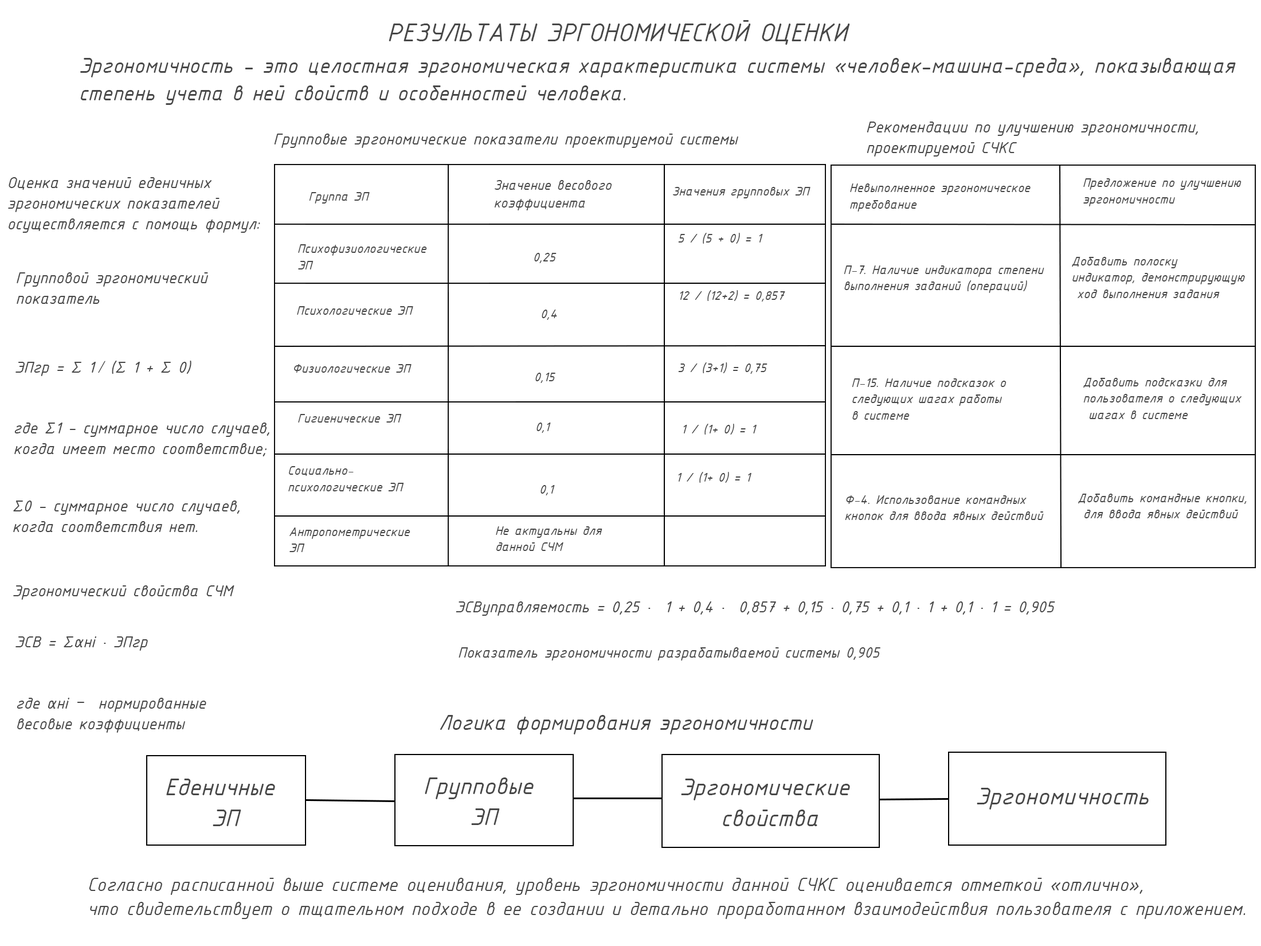
<style>
.page{position:relative;width:1261px;height:946px;background:#ffffff}
.page>*{position:absolute;margin:0}
.t1{font:27.5px "ISOCPEURItalic";color:#484848}
.t2{font:22.9px "ISOCPEURItalic";color:#484848}
.t3{font:17.2px "ISOCPEURItalic";color:#484848}
.t4{font:14.9px "ISOCPEURItalic";color:#484848}
.t5{font:13.8px "ISOCPEURItalic";color:#484848}
.t6{font:17.2px "MyriadPro-Regular";color:#484848}
.t7{font:16px "ISOCPEURItalic";color:#484848}
.t8{font:25.8px "ISOCPEURItalic";color:#484848}
.t9{font:20.1px "ISOCPEURItalic";color:#484848}
</style>
<div class="page">
<p class="t1" style="left:389px;top:20px;width:461px;height:25px">РЕЗУЛЬТАТЫ ЭРГОНОМИЧЕСКОЙ ОЦЕНКИ</p>
<p class="t2" style="left:80px;top:58px;width:1156px;height:47px">Эргономичность - это целостная эргономическая характеристика системы «человек-машина-среда», показывающая <br>степень учета в ней свойств и особенностей человека.</p>
<p class="t3" style="left:867px;top:122px;width:331px;height:34px">Рекомендации по улучшению эргономичности, <br>проектируемой СЧКС</p>
<p class="t3" style="left:274px;top:134px;width:464px;height:14px">Групповые эргономические показатели проектируемой системы</p>
<p class="t3" style="left:8px;top:177px;width:252px;height:56px">Оценка значений еденичных <br>эргономических показателей<br>осуществляется с помощь формул:</p>
<p class="t4" style="left:495px;top:180px;width:117px;height:30px">Значение весового <br>коэффициента</p>
<p class="t5" style="left:850px;top:183px;width:181px;height:28px">Невыполненное эргономическое <br>требование</p>
<p class="t5" style="left:1083px;top:178px;width:158px;height:28px">Предложение по улучшению <br>эргономичности</p>
<p class="t5" style="left:309px;top:192px;width:61px;height:11px">Группа ЭП</p>
<p class="t5" style="left:673px;top:187px;width:137px;height:11px">Значения групповых ЭП</p>
<p class="t5" style="left:678px;top:233px;width:85px;height:11px">5 / (5 + 0) = 1</p>
<p class="t5" style="left:298px;top:244px;width:129px;height:25px">Психофизиологические <br>ЭП</p>
<p class="t5" style="left:534px;top:253px;width:23px;height:10px">0,25</p>
<p class="t5" style="left:1072px;top:257px;width:173px;height:41px">Добавить полоску <br>индикатор, демонстрирующую<br> ход выполнения задания</p>
<p class="t5" style="left:844px;top:265px;width:200px;height:28px">П-7. Наличие индикатора степени <br>выполнения заданий (операций)</p>
<p class="t3" style="left:17px;top:272px;width:191px;height:32px">Групповой эргономический <br>показатель</p>
<p class="t5" style="left:680px;top:290px;width:105px;height:11px">12 / (12+2) = 0,857</p>
<p class="t5" style="left:297px;top:306px;width:116px;height:9px">Психологические ЭП</p>
<p class="t5" style="left:542px;top:309px;width:15px;height:11px">0,4</p>
<p class="t3" style="left:15px;top:361px;width:176px;height:15px">ЭПгр = ∑ 1 <span class="t6">∕</span> (∑ 1 + ∑ 0)</p>
<p class="t5" style="left:294px;top:364px;width:118px;height:9px">Физиологические ЭП</p>
<p class="t5" style="left:678px;top:362px;width:89px;height:12px">3 / (3+1) = 0,75</p>
<p class="t5" style="left:535px;top:372px;width:20px;height:11px">0,15</p>
<p class="t5" style="left:852px;top:378px;width:154px;height:42px">П-15. Наличие подсказок о <br>следующих шагах работы <br>в системе</p>
<p class="t5" style="left:1083px;top:378px;width:158px;height:41px">Добавить подсказки для <br>пользователя о следующих<br> шагах в системе</p>
<p class="t5" style="left:298px;top:414px;width:104px;height:8px">Гигиенические ЭП</p>
<p class="t3" style="left:14px;top:422px;width:255px;height:34px">где ∑1 − суммарное число случаев, <br>когда имеет место соответствие;</p>
<p class="t5" style="left:536px;top:422px;width:15px;height:11px">0,1</p>
<p class="t5" style="left:683px;top:424px;width:74px;height:10px">1 / (1+ 0) = 1</p>
<p class="t5" style="left:288px;top:466px;width:116px;height:25px">Социально-<br>психологические ЭП</p>
<p class="t5" style="left:678px;top:472px;width:73px;height:11px">1 / (1+ 0) = 1</p>
<p class="t5" style="left:540px;top:484px;width:15px;height:11px">0,1</p>
<p class="t5" style="left:845px;top:495px;width:199px;height:25px">Ф-4. Использование командных <br>кнопок для ввода явных действий</p>
<p class="t5" style="left:1078px;top:493px;width:169px;height:25px">Добавить командные кнопки,<br> для ввода явных действий</p>
<p class="t3" style="left:13px;top:500px;width:227px;height:32px">∑0 − суммарное число случаев, <br>когда соответствия нет.</p>
<p class="t5" style="left:289px;top:527px;width:121px;height:25px">Антропометрические <br>ЭП</p>
<p class="t5" style="left:496px;top:526px;width:106px;height:25px">Не актуальны для <br>данной СЧМ</p>
<p class="t3" style="left:13px;top:585px;width:221px;height:15px">Эргономический свойства СЧМ</p>
<p class="t3" style="left:456px;top:601px;width:599px;height:15px">ЭСВуправляемость = 0,25 ·  1 + 0,4 ·  0,857 + 0,15 · 0,75 + 0,1 · 1 + 0,1 · 1 = 0,905</p>
<p class="t3" style="left:15px;top:636px;width:133px;height:15px">ЭСВ = ∑αнi · ЭПгр</p>
<p class="t7" style="left:459px;top:647px;width:421px;height:13px">Показатель эргономичности разрабатываемой системы 0,905</p>
<p class="t3" style="left:17px;top:698px;width:189px;height:34px">где αнi – нормированные <br>весовые коэффициенты</p>
<p class="t2" style="left:440px;top:715px;width:373px;height:19px">Логика формирования эргономичности</p>
<p class="t8" style="left:166px;top:778px;width:109px;height:48px;text-align:center">Еденичные <br>ЭП</p>
<p class="t8" style="left:425px;top:777px;width:109px;height:48px;text-align:center">Групповые <br>ЭП</p>
<p class="t8" style="left:681px;top:778px;width:169px;height:48px;text-align:center">Эргономические <br>свойства</p>
<p class="t8" style="left:977px;top:787px;width:172px;height:22px">Эргономичность</p>
<p class="t9" style="left:89px;top:877px;width:1156px;height:42px">Согласно расписанной выше системе оценивания, уровень эргономичности данной СЧКС оценивается отметкой «отлично», <br>что свидетельствует о тщательном подходе в ее создании и детально проработанном взаимодействия пользователя с приложением.</p>
</div>
